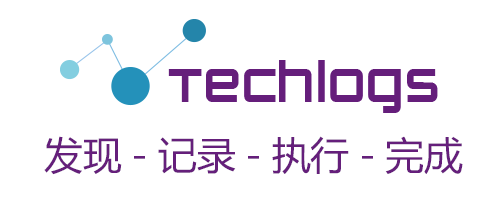
<style>
.page{position:relative;width:500px;height:200px;background:#ffffff}
.page>*{position:absolute;margin:0}
.t1{font:38.6px "MicrosoftYaHei";color:#651f7b}
</style>
<div class="page">
<p class="t1" style="left:44px;top:136px;width:419px;height:39px">发现-记录-执行-完成</p>
</div>
